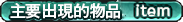
<style>
.page{position:relative;width:183px;height:22px}
.page>*{position:absolute;margin:0}
.t1{font:16px "GothicMB101Pr6N-Medium";color:#ffffff}
</style>
<div class="page">
<p class="t1" style="left:10px;top:3px;width:110px;height:16px">主要出現的物品</p>
</div>
